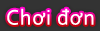
<style>
.page{position:relative;width:100px;height:31px;background:#333333}
.page>*{position:absolute;margin:0}
.t1{font:22px "Corbel";letter-spacing:0.035em;color:#ffffff}
</style>
<div class="page">
<p class="t1" style="left:7px;top:8px;width:87px;height:17px">Chơi đơn</p>
</div>
